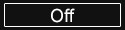
<style>
.page{position:relative;width:125px;height:30px;background:#111111}
.page>*{position:absolute;margin:0}
.t1{font:18px "ArialMT";color:#ffffff}
</style>
<div class="page">
<p class="t1" style="left:51px;top:8px;width:24px;height:15px">Off</p>
</div>
